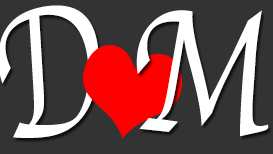
<style>
.page{position:relative;width:273px;height:154px;background:#333333}
.page>*{position:absolute;margin:0}
.t1{font:189.1px "Apple-Chancery";letter-spacing:-0.01em;color:#ffffff;scale:0.67 1}
.t2{font:181.8px "Apple-Chancery";letter-spacing:-0.01em;color:#ffffff;scale:0.77 1}
</style>
<div class="page">
<p class="t1" style="left:0px;top:5px;width:99px;height:133px;rotate:-8deg">D</p>
<p class="t2" style="left:136px;top:10px;width:133px;height:127px;rotate:2deg">M</p>
</div>
